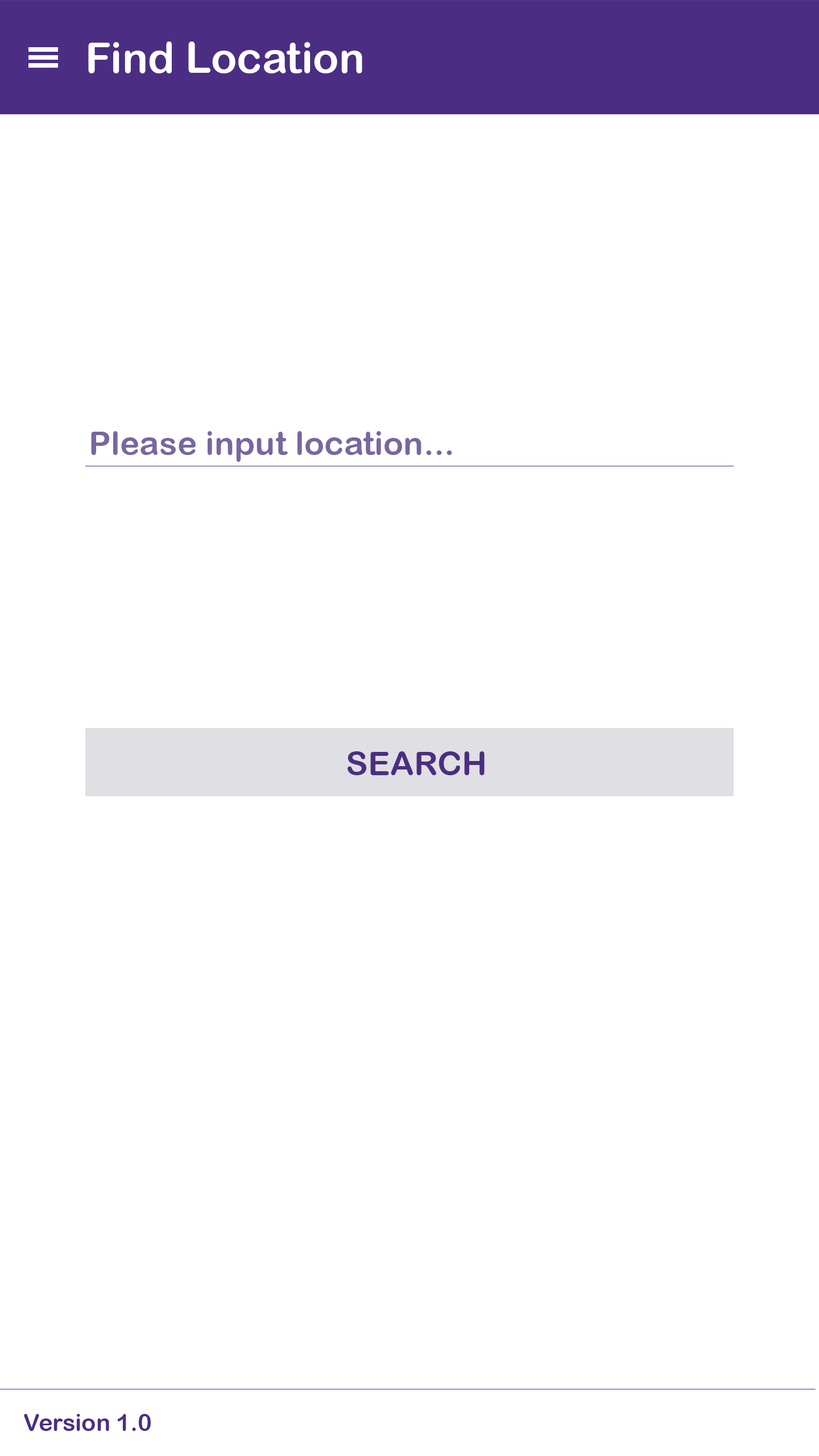
<style>
.page{position:relative;width:819px;height:1456px;background:#ffffff}
.page>*{position:absolute;margin:0}
.t1{font:42.7px "ArialRoundedMTBold";color:#ffffff}
.t2{font:33.2px "ArialRoundedMTBold";color:#78679f}
.t3{font:33.2px "ArialRoundedMTBold";color:#4b2e83}
.t4{font:23.7px "ArialRoundedMTBold";color:#4b2e83}
</style>
<div class="page">
<p class="t1" style="left:88px;top:42px;width:274px;height:31px">Find Location</p>
<p class="t2" style="left:91px;top:431px;width:361px;height:31px">Please input location...</p>
<p class="t3" style="left:348px;top:751px;width:137px;height:24px">SEARCH</p>
<p class="t4" style="left:24px;top:1414px;width:127px;height:17px">Version 1.0</p>
</div>
